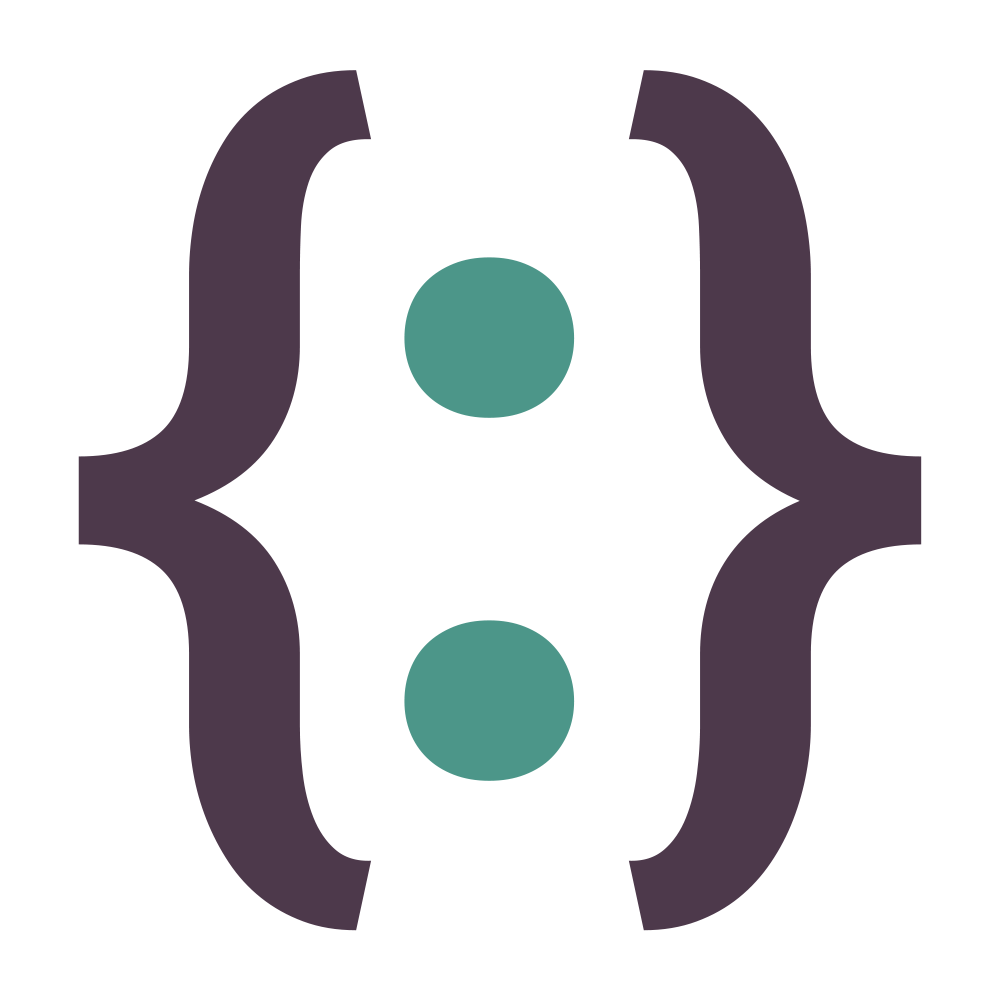
<style>
.page{position:relative;width:1000px;height:1000px;background:#ffffff}
.page>*{position:absolute;margin:0}
.t1{font:900px "RobotoMonoForPowerline-Bold";letter-spacing:-0.3em;color:#4d394b}
.t2{font:900px "RobotoMonoForPowerline-Bold";letter-spacing:-0.3em;color:#4c9689}
</style>
<div class="page">
<p class="t1" style="left:78px;top:70px;width:844px;height:861px">{<span class="t2">:</span>}</p>
</div>
